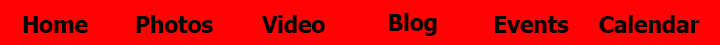
<style>
.page{position:relative;width:720px;height:45px;background:#fe0303}
.page>*{position:absolute;margin:0}
.t1{font:22.5px "Tahoma-Bold";color:#000000}
</style>
<div class="page">
<p class="t1" style="left:23px;top:16px;width:65px;height:17px">Home</p>
<p class="t1" style="left:136px;top:15px;width:77px;height:18px">Photos</p>
<p class="t1" style="left:262px;top:15px;width:63px;height:18px">Video</p>
<p class="t1" style="left:389px;top:13px;width:48px;height:23px">Blog</p>
<p class="t1" style="left:495px;top:16px;width:74px;height:17px">Events</p>
<p class="t1" style="left:599px;top:15px;width:101px;height:18px">Calendar</p>
</div>
